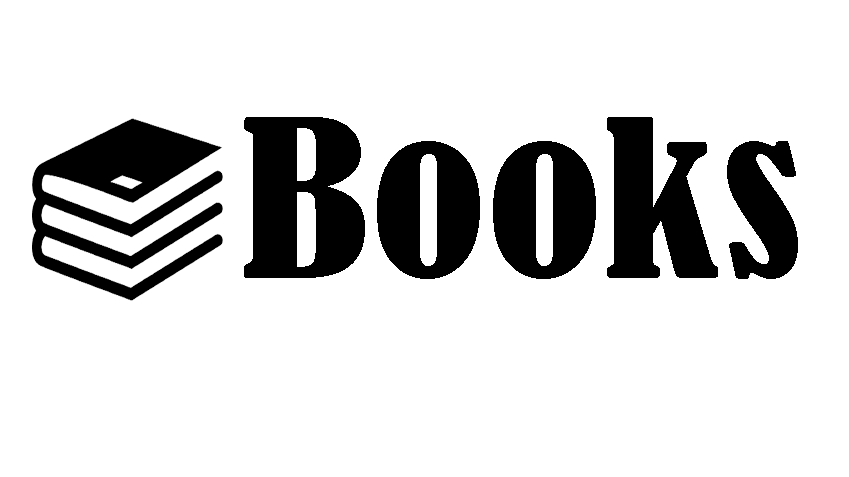
<style>
.page{position:relative;width:849px;height:477px;background:#ffffff}
.page>*{position:absolute;margin:0}
.t1{font:203.8px "BernardMT-Condensed";color:#000000;scale:1.18 1}
</style>
<div class="page">
<p class="t1" style="left:244px;top:117px;width:554px;height:162px">Books</p>
</div>
